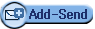
<style>
.page{position:relative;width:95px;height:29px;background:#82b3e7}
.page>*{position:absolute;margin:0}
.t1{font:12px "Gulim";letter-spacing:0.01em;color:#1d2f6a}
</style>
<div class="page">
<p class="t1" style="left:29px;top:9px;width:57px;height:10px">Add-Send</p>
<p class="t1" style="left:30px;top:9px;width:57px;height:10px">Add-Send</p>
</div>
